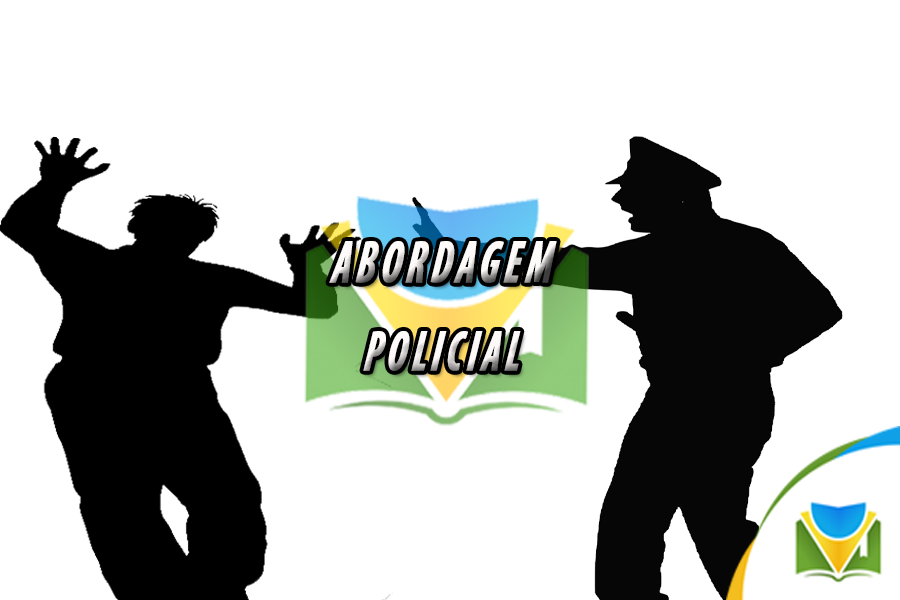
<style>
.page{position:relative;width:900px;height:600px;background:#ffffff}
.page>*{position:absolute;margin:0}
.t1{font:59.9px/44.1px "MyriadPro-BoldCondIt";letter-spacing:0.1em;text-transform:uppercase;font-weight:bold;font-style:italic;scale:0.67 1}
.t2{font:57.2px/44.1px "MyriadPro-BoldCondIt";letter-spacing:0.1em;text-transform:uppercase;font-weight:bold;font-style:italic;scale:0.67 1}
</style>
<div class="page">
<p class="t1" style="left:329px;top:241px;width:228px;height:130px;text-align:center">ABORDAGEM <br><br><span class="t2">POLICIAL</span></p>
</div>
